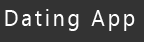
<style>
.page{position:relative;width:144px;height:42px;background:#333333}
.page>*{position:absolute;margin:0}
.t1{font:23.3px "SegoeUI";letter-spacing:0.15em;color:#ffffff;scale:0.88 1}
</style>
<div class="page">
<p class="t1" style="left:5px;top:9px;width:130px;height:22px">Dating App</p>
</div>
